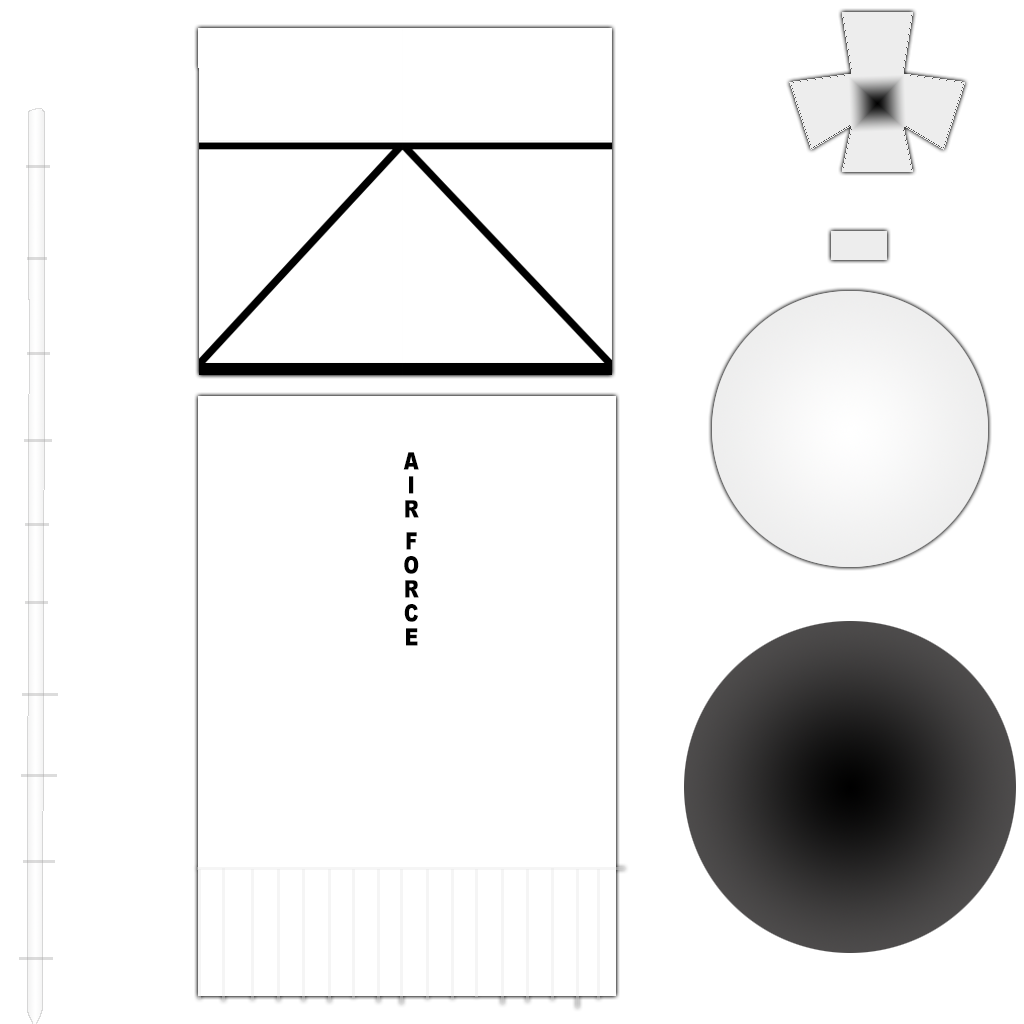
<style>
.page{position:relative;width:1024px;height:1024px;background:#ffffff}
.page>*{position:absolute;margin:0}
.t1{font:19.2px "Arial-Black";color:#000000;scale:1.25 1}
</style>
<div class="page">
<p class="t1" style="left:403px;top:452px;width:16px;height:194px;text-align:center">AIR FORCE</p>
</div>
